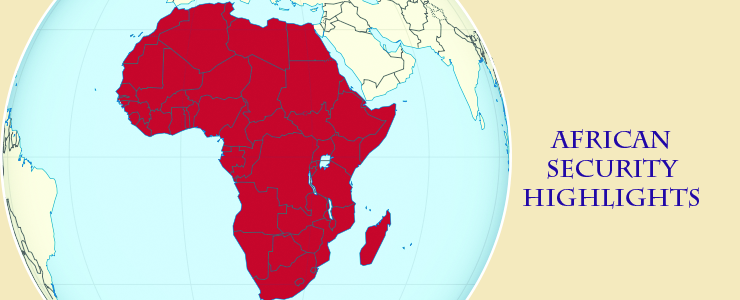
<style>
.page{position:relative;width:740px;height:300px;background:#f4eabe}
.page>*{position:absolute;margin:0}
.t1{font:24px "CharlemagneStd-Bold";color:#2108a6}
</style>
<div class="page">
<p class="t1" style="left:523px;top:129px;width:176px;height:80px">African<br>Security<br>highlights</p>
</div>
